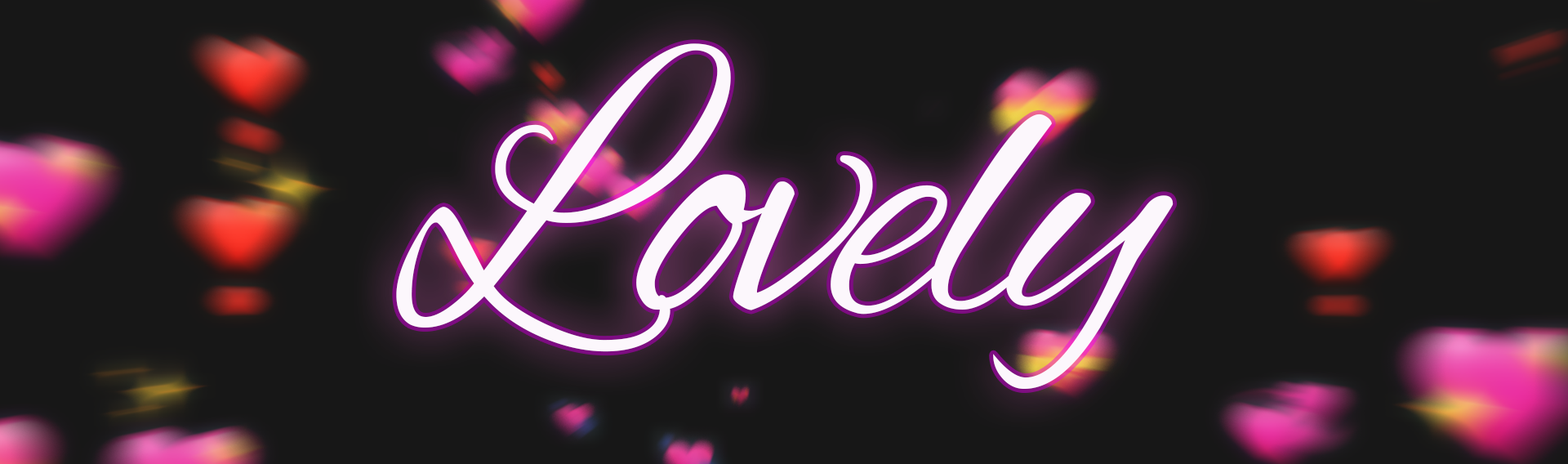
<style>
.page{position:relative;width:1568px;height:464px;background:#171717}
.page>*{position:absolute;margin:0}
.t1{font:390.1px "AlexBrush-Regular";letter-spacing:-0.03em;color:#fcf7fc}
</style>
<div class="page">
<p class="t1" style="left:396px;top:43px;width:778px;height:346px">Lovely</p>
</div>
